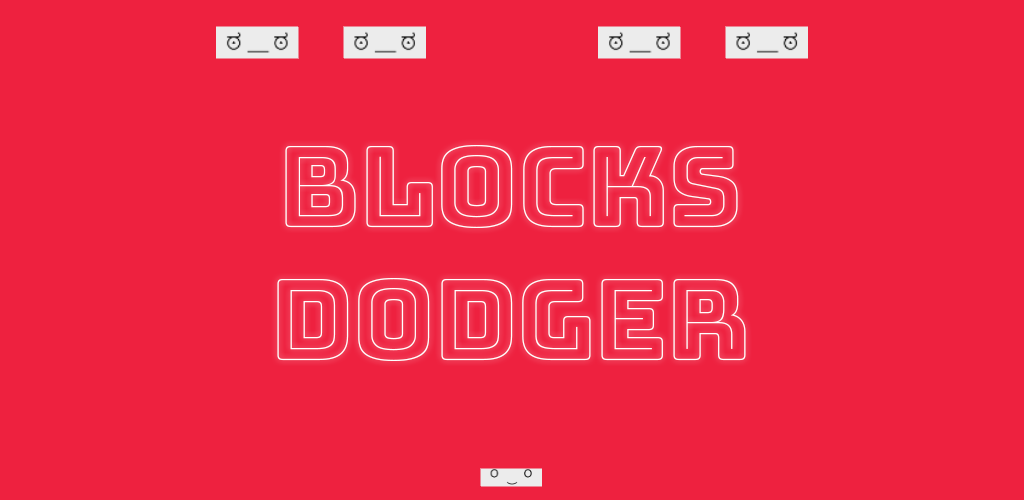
<style>
.page{position:relative;width:1024px;height:500px;background:#ee213f}
.page>*{position:absolute;margin:0}
.t1{font:110.4px "BungeeOutline-Regular";color:#ffffff}
</style>
<div class="page">
<p class="t1" style="left:277px;top:145px;width:469px;height:216px;text-align:center">blocks<br>dodger</p>
</div>
